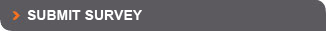
<style>
.page{position:relative;width:326px;height:31px;background:#5c5a5f}
.page>*{position:absolute;margin:0}
.t1{font:14px "Arial-BoldMT";color:#ffffff}
</style>
<div class="page">
<p class="t1" style="left:27px;top:10px;width:115px;height:10px">SUBMIT SURVEY</p>
</div>
